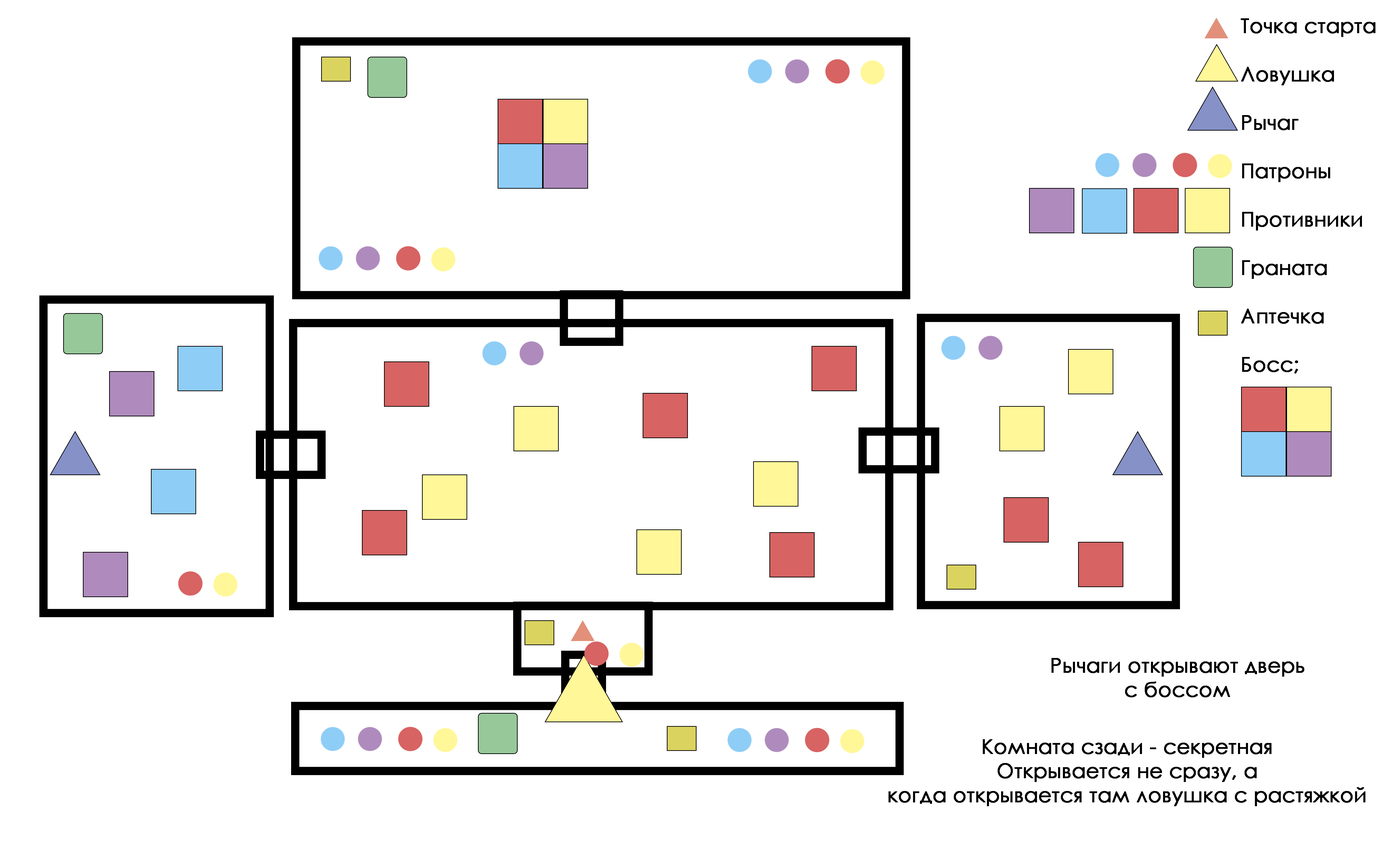
<style>
.page{position:relative;width:1392px;height:857px;background:#ffffff}
.page>*{position:absolute;margin:0}
.t1{font:20.1px "CenturyGothic";color:#000000;font-weight:bold}
</style>
<div class="page">
<p class="t1" style="left:1241px;top:18px;width:135px;height:355px">Точка старта<br><br>Ловушка<br><br>Рычаг<br><br>Патроны<br><br>Противники <br><br>Граната<br><br>Аптечка<br><br>Босс;</p>
<p class="t1" style="left:1052px;top:658px;width:252px;height:39px;text-align:center">Рычаги открывают дверь<br>с боссом</p>
<p class="t1" style="left:889px;top:739px;width:477px;height:67px;text-align:center">Комната сзади - секретная<br>Открывается не сразу, а<br>когда открывается там ловушка с растяжкой</p>
</div>
